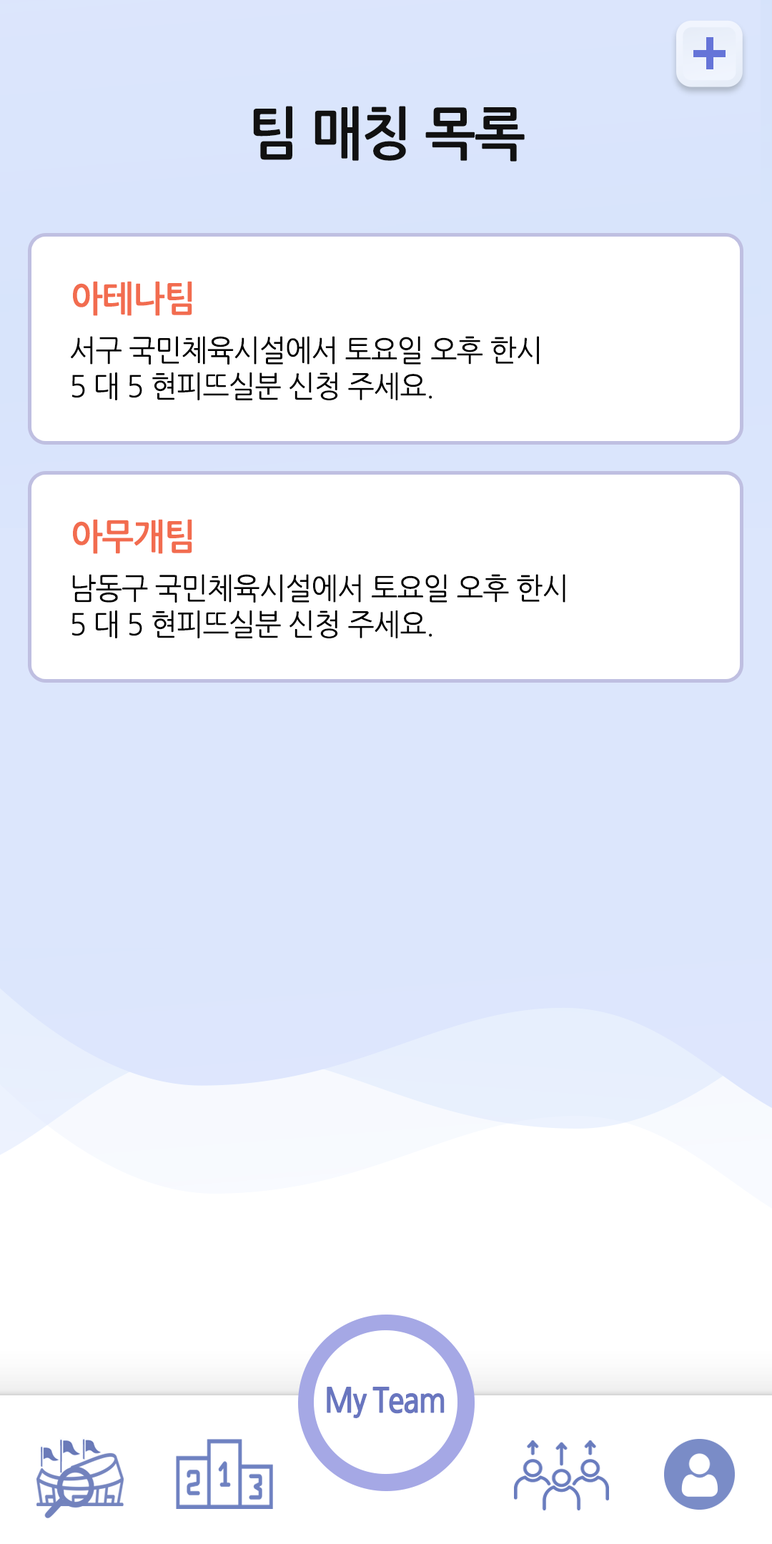
<style>
.page{position:relative;width:772px;height:1544px;background:#ffffff}
.page>*{position:absolute;margin:0}
.t1{font:57.2px "NanumGothicBold";letter-spacing:-0.025em;color:#111111;scale:0.95 1}
.t2{font:35.7px "NanumGothicBold";letter-spacing:-0.025em;color:#f26c4f;scale:0.95 1}
.t3{font:30px "NanumGothic";letter-spacing:-0.025em;color:#000000;scale:0.95 1}
</style>
<div class="page">
<p class="t1" style="left:253px;top:106px;width:272px;height:56px">팀 매칭 목록</p>
<p class="t2" style="left:73px;top:281px;width:119px;height:35px">아테나팀</p>
<p class="t3" style="left:71px;top:336px;width:468px;height:64px">서구 국민체육시설에서 토요일 오후 한시<br>5 대 5 현피뜨실분 신청 주세요.</p>
<p class="t2" style="left:73px;top:519px;width:119px;height:35px">아무개팀</p>
<p class="t3" style="left:72px;top:574px;width:494px;height:64px">남동구 국민체육시설에서 토요일 오후 한시<br>5 대 5 현피뜨실분 신청 주세요.</p>
</div>
